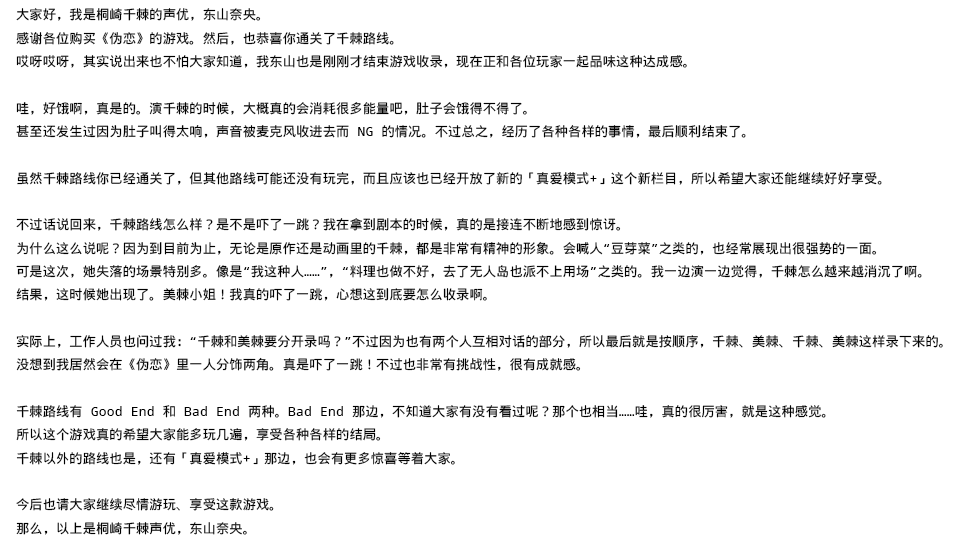
<style>
.page{position:relative;width:960px;height:544px;background:#ffffff}
.page>*{position:absolute;margin:0}
.t1{font:13.3px "WenQuanYiMicroHeiMono";color:#000000}
</style>
<div class="page">
<p class="t1" style="left:16px;top:8px;width:927px;height:527px">大家好，我是桐崎千棘的声优，东山奈央。<br>感谢各位购买《伪恋》的游戏。然后，也恭喜你通关了千棘路线。<br>哎呀哎呀，其实说出来也不怕大家知道，我东山也是刚刚才结束游戏收录，现在正和各位玩家一起品味这种达成感。<br><br>哇，好饿啊，真是的。演千棘的时候，大概真的会消耗很多能量吧，肚子会饿得不得了。<br>甚至还发生过因为肚子叫得太响，声音被麦克风收进去而 NG 的情况。不过总之，经历了各种各样的事情，最后顺利结束了。<br><br>虽然千棘路线你已经通关了，但其他路线可能还没有玩完，而且应该也已经开放了新的「真爱模式+」这个新栏目，所以希望大家还能继续好好享受。<br><br>不过话说回来，千棘路线怎么样？是不是吓了一跳？我在拿到剧本的时候，真的是接连不断地感到惊讶。<br>为什么这么说呢？因为到目前为止，无论是原作还是动画里的千棘，都是非常有精神的形象。会喊人“豆芽菜”之类的，也经常展现出很强势的一面。<br>可是这次，她失落的场景特别多。像是“我这种人……”，“料理也做不好，去了无人岛也派不上用场”之类的。我一边演一边觉得，千棘怎么越来越消沉了啊。<br>结果，这时候她出现了。美棘小姐！我真的吓了一跳，心想这到底要怎么收录啊。<br><br>实际上，工作人员也问过我：“千棘和美棘要分开录吗？”不过因为也有两个人互相对话的部分，所以最后就是按顺序，千棘、美棘、千棘、美棘这样录下来的。<br>没想到我居然会在《伪恋》里一人分饰两角。真是吓了一跳！不过也非常有挑战性，很有成就感。<br><br>千棘路线有 Good End 和 Bad End 两种。Bad End 那边，不知道大家有没有看过呢？那个也相当……哇，真的很厉害，就是这种感觉。<br>所以这个游戏真的希望大家能多玩几遍，享受各种各样的结局。<br>千棘以外的路线也是，还有「真爱模式+」那边，也会有更多惊喜等着大家。<br><br>今后也请大家继续尽情游玩、享受这款游戏。<br>那么，以上是桐崎千棘声优，东山奈央。</p>
</div>
